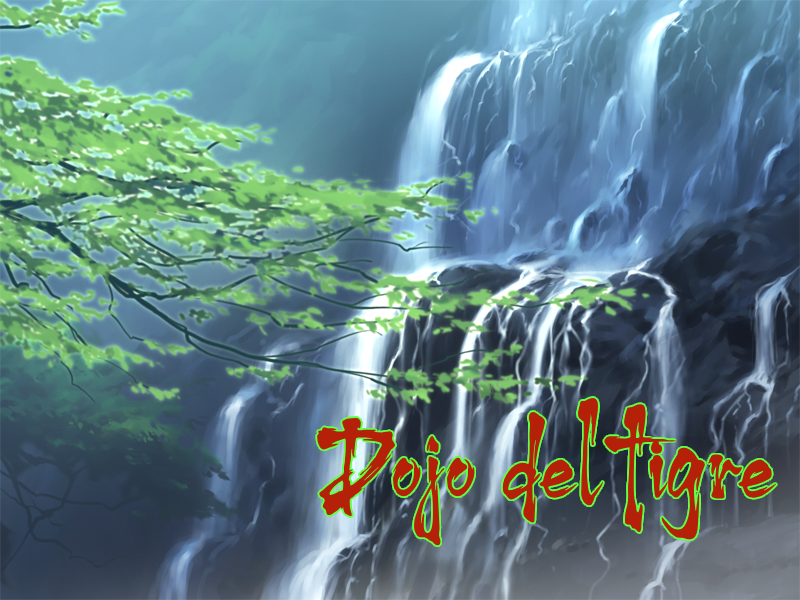
<style>
.page{position:relative;width:800px;height:600px}
.page>*{position:absolute;margin:0}
.t1{font:128px "Harukaze-Demo";color:#b42008}
</style>
<div class="page">
<p class="t1" style="left:317px;top:398px;width:460px;height:148px">Dojo del tigre</p>
</div>
